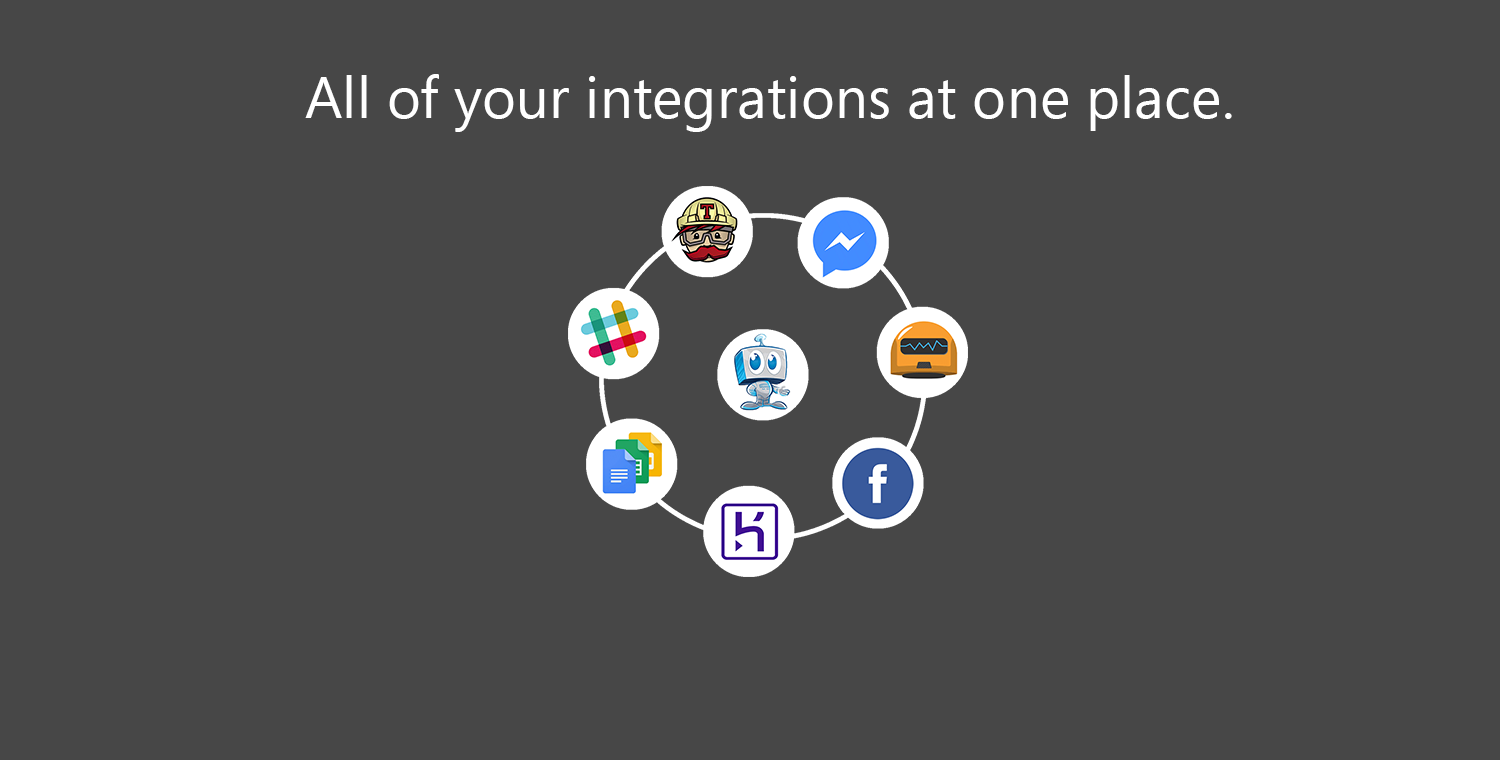
<style>
.page{position:relative;width:1500px;height:760px;background:#474747}
.page>*{position:absolute;margin:0}
.t1{font:58.3px "SegoeUI-Regular";color:#ffffff}
</style>
<div class="page">
<p class="t1" style="left:305px;top:74px;width:927px;height:58px">All of your integrations at one place.</p>
</div>
